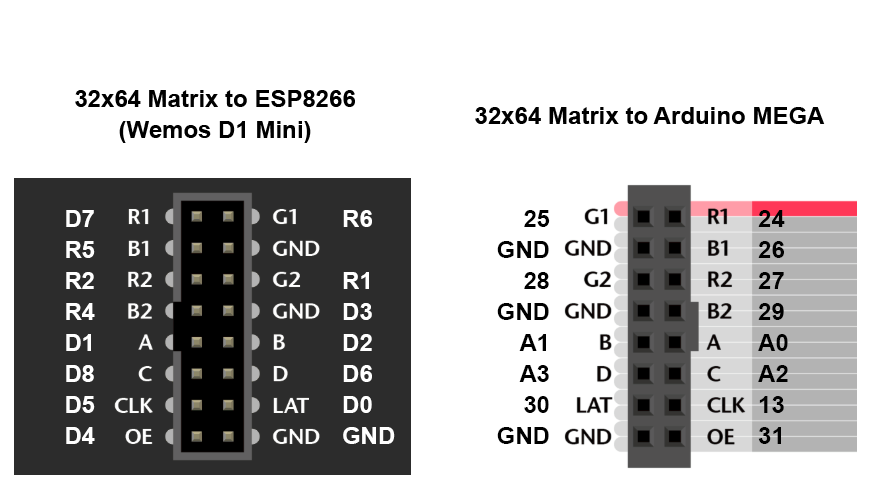
<style>
.page{position:relative;width:875px;height:500px;background:#ffffff}
.page>*{position:absolute;margin:0}
.t1{font:24px/31px "Arial-BoldMT";color:#000000}
.t2{font:24px "Arial-BoldMT";color:#000000}
.t3{font:24px/31px "Arial-BoldMT";color:#ffffff}
</style>
<div class="page">
<p class="t1" style="left:75px;top:90px;width:280px;height:53px;text-align:center">32x64 Matrix to ESP8266<br>(Wemos D1 Mini)</p>
<p class="t2" style="left:475px;top:107px;width:350px;height:17px">32x64 Matrix to Arduino MEGA</p>
<p class="t3" style="left:66px;top:210px;width:29px;height:234px;text-align:right">D7<br>R5<br>R2<br>R4<br>D1<br>D8<br>D5<br>D4</p>
<p class="t3" style="left:343px;top:210px;width:52px;height:234px">R6<br><br>R1<br>D3<br>D2<br>D6<br>D0<br>GND<br><br>GND</p>
<p class="t1" style="left:497px;top:210px;width:53px;height:234px;text-align:right">25<br>GND<br>28<br>GND<br>A1<br>A3<br>30<br>GND</p>
<p class="t1" style="left:758px;top:210px;width:30px;height:234px">24<br>26<br>27<br>29<br>A0<br>A2<br>13<br>31</p>
</div>
